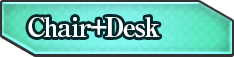
<style>
.page{position:relative;width:234px;height:57px}
.page>*{position:absolute;margin:0}
.t1{font:27px "RyuminPro-ExBold";letter-spacing:-0.08em;color:#ffffff}
</style>
<div class="page">
<p class="t1" style="left:28px;top:17px;width:132px;height:21px">Chair+Desk</p>
</div>
